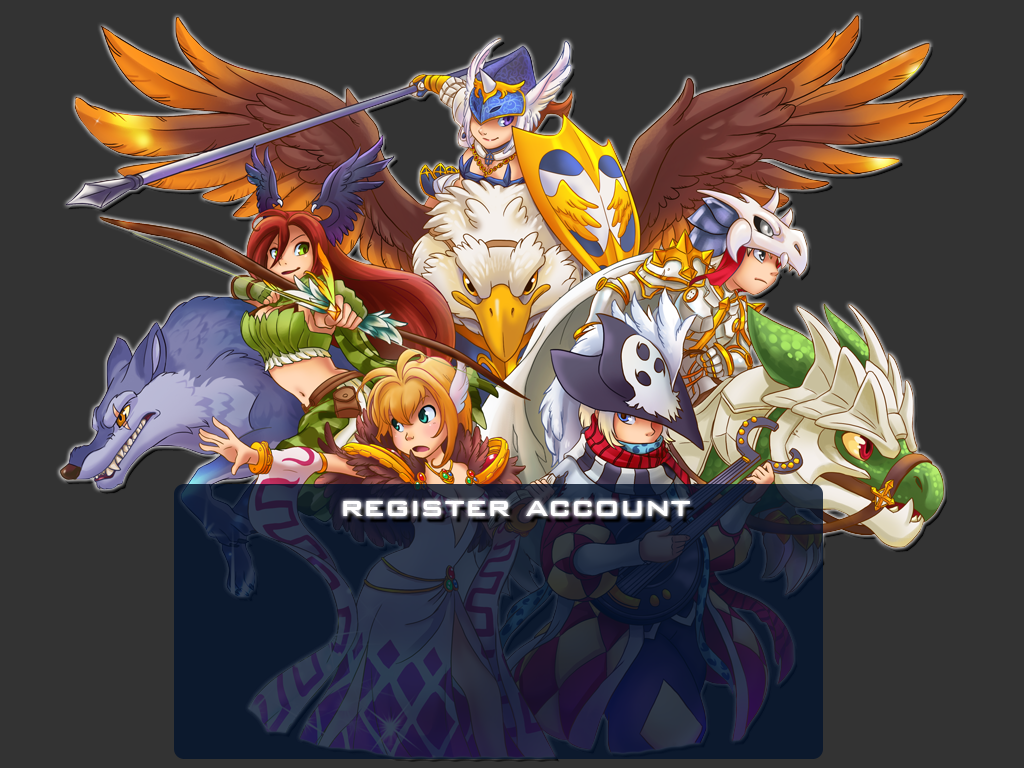
<style>
.page{position:relative;width:1024px;height:768px;background:#333333}
.page>*{position:absolute;margin:0}
.t1{font:36px "BankGothicBT-Medium";color:#ffffff}
</style>
<div class="page">
<p class="t1" style="left:343px;top:501px;width:347px;height:15px">register account</p>
</div>
